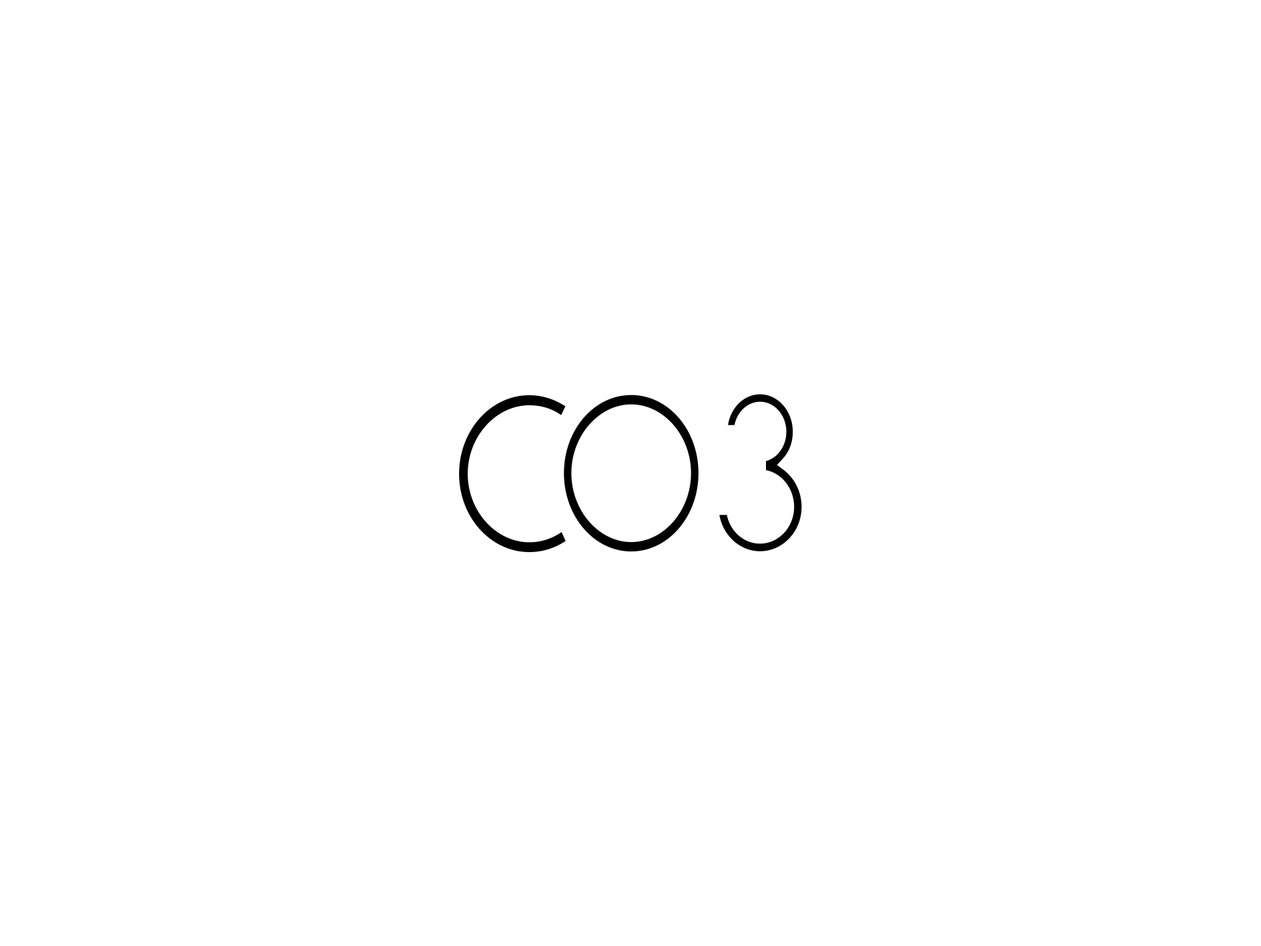
<style>
.page{position:relative;width:1261px;height:946px;background:#ffffff}
.page>*{position:absolute;margin:0}
.t1{font:222.4px "Alcubierre";color:#000000;scale:0.9 1}
</style>
<div class="page">
<p class="t1" style="left:459px;top:394px;width:343px;height:158px">CO3</p>
</div>
